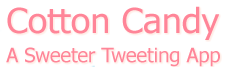
<style>
.page{position:relative;width:238px;height:67px;background:#ffffff}
.page>*{position:absolute;margin:0}
.t1{font:20px/29.2px "Tahoma";color:#ff8598}
.t2{font:34.2px/24.4px "Tahoma";color:#ff8598;scale:1.05 1}
</style>
<div class="page">
<p class="t1" style="left:6px;top:6px;width:214px;height:61px"><span class="t2">Cotton Candy<br></span>A Sweeter Tweeting App</p>
</div>
